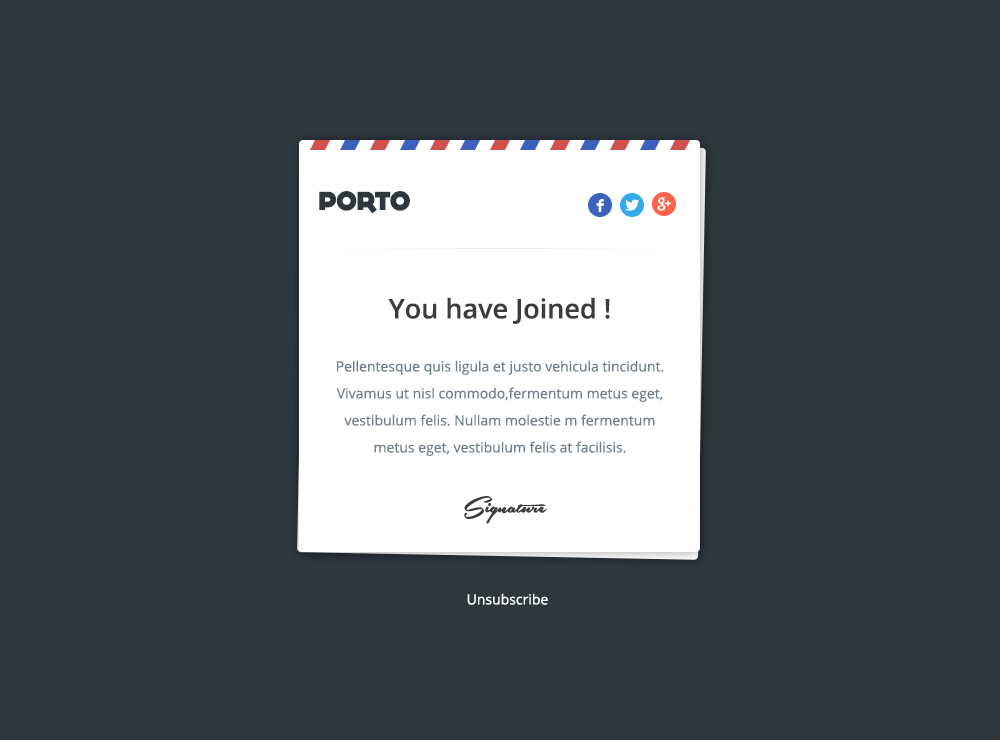
<style>
.page{position:relative;width:1000px;height:740px;background:#2e363e}
.page>*{position:absolute;margin:0}
.t1{font:26px "DOCK11-Heavy";color:#2e363e}
.t2{font:14px/27px "OpenSans";color:#717f8c}
.t3{font:27px/38px "OpenSans-Semibold";color:#3c3c3c}
.t4{font:14px/37px "OpenSans";color:#717f8c}
.t5{font:30px "SouthernAirePersonalUseOnly";color:#3c3c3c}
.t6{font:14px "OpenSans";color:#ffffff}
.t7{font:27px "OpenSans-Semibold";color:#ffffff}
</style>
<div class="page">
<p class="t1" style="left:319px;top:191px;width:91px;height:23px">PORTO</p>
<p class="t2" style="left:336px;top:297px;width:328px;height:159px;text-align:center"><span class="t3">You have Joined !<br></span><span class="t4">Pellentesque quis ligula et justo vehicula tincidunt. </span>Vivamus ut nisl commodo,fermentum metus eget, vestibulum felis. Nullam molestie m fermentum metus eget, vestibulum felis at facilisis.</p>
<p class="t5" style="left:464px;top:496px;width:83px;height:28px">Signature</p>
<p class="t6" style="left:467px;top:593px;width:81px;height:12px"><span class="t7"> </span>Unsubscribe</p>
</div>
